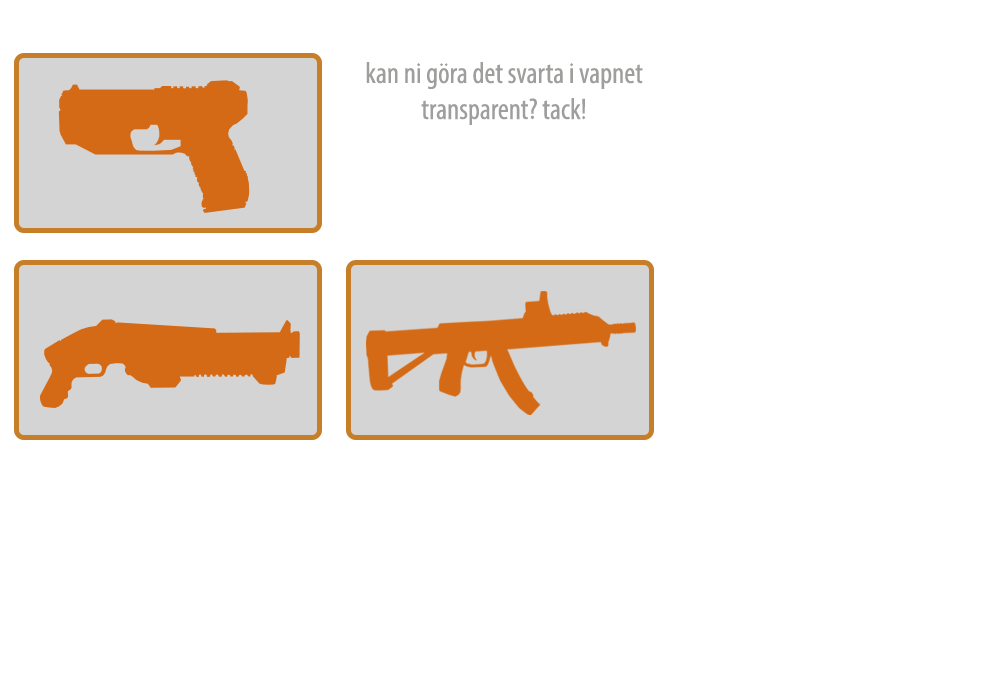
<style>
.page{position:relative;width:1000px;height:700px;background:#ffffff}
.page>*{position:absolute;margin:0}
.t1{font:30px "MyriadPro-Cond";color:#9e9e9c}
</style>
<div class="page">
<p class="t1" style="left:366px;top:62px;width:277px;height:63px;text-align:center">kan ni göra det svarta i vapnet<br>transparent? tack!</p>
</div>
